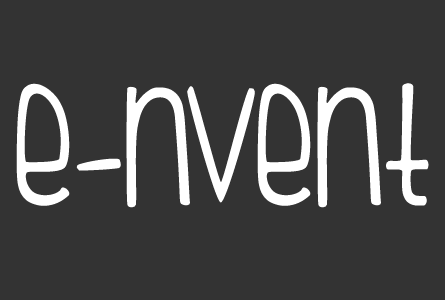
<style>
.page{position:relative;width:445px;height:300px;background:#333333}
.page>*{position:absolute;margin:0}
.t1{font:178px "FISHfingers";color:#ffffff}
</style>
<div class="page">
<p class="t1" style="left:16px;top:83px;width:413px;height:125px">e-nvent</p>
</div>
